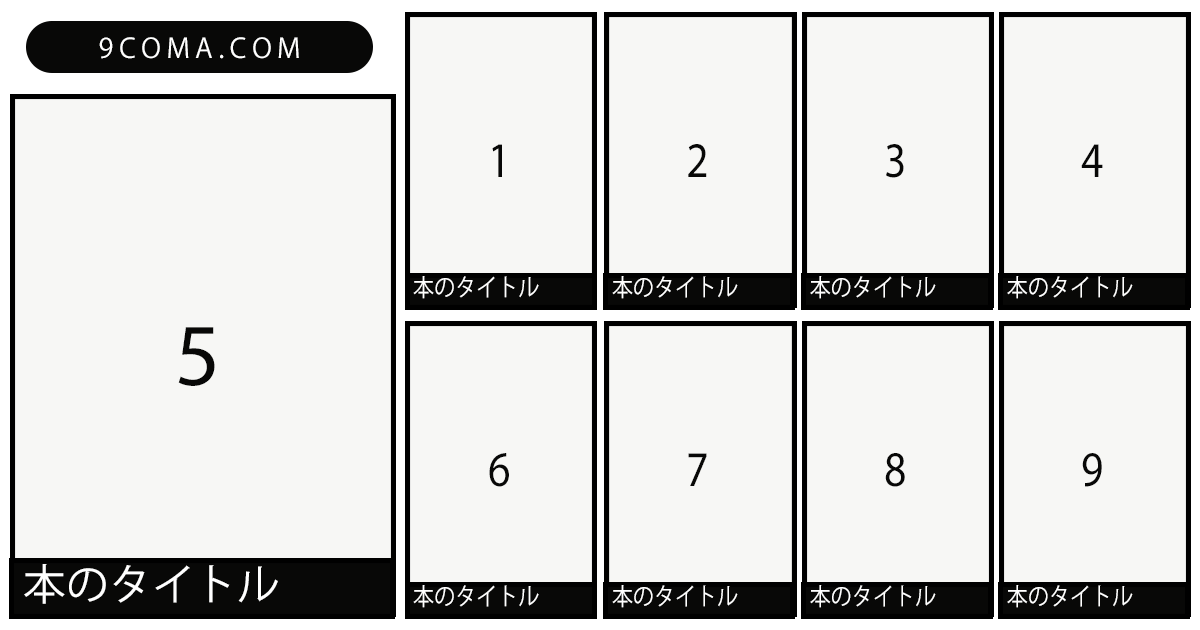
<style>
.page{position:relative;width:1200px;height:630px;background:#f7f7f5}
.page>*{position:absolute;margin:0}
.t1{font:27px "KozGoPr6N-Regular";letter-spacing:0.2em;color:#ffffff}
.t2{font:50px "MyriadPro-Regular";color:#080807;scale:0.88 1}
.t3{font:24px "KozGoPr6N-Regular";color:#ffffff;scale:0.88 1}
.t4{font:88.9px "MyriadPro-Regular";color:#080807}
.t5{font:42.7px "KozGoPr6N-Regular";color:#ffffff}
</style>
<div class="page">
<p class="t1" style="left:99px;top:37px;width:200px;height:22px">9COMA.COM</p>
<p class="t2" style="left:492px;top:144px;width:10px;height:33px">1</p>
<p class="t2" style="left:688px;top:144px;width:19px;height:33px">2</p>
<p class="t2" style="left:886px;top:144px;width:18px;height:34px">3</p>
<p class="t2" style="left:1081px;top:144px;width:22px;height:33px">4</p>
<p class="t3" style="left:413px;top:276px;width:126px;height:23px">本のタイトル</p>
<p class="t3" style="left:612px;top:276px;width:126px;height:23px">本のタイトル</p>
<p class="t3" style="left:810px;top:276px;width:126px;height:23px">本のタイトル</p>
<p class="t3" style="left:1007px;top:276px;width:126px;height:23px">本のタイトル</p>
<p class="t4" style="left:178px;top:327px;width:37px;height:59px">5</p>
<p class="t2" style="left:489px;top:453px;width:20px;height:34px">6</p>
<p class="t2" style="left:688px;top:453px;width:19px;height:33px">7</p>
<p class="t2" style="left:885px;top:453px;width:20px;height:34px">8</p>
<p class="t2" style="left:1082px;top:453px;width:20px;height:34px">9</p>
<p class="t5" style="left:24px;top:564px;width:254px;height:40px">本のタイトル</p>
<p class="t3" style="left:413px;top:585px;width:126px;height:23px">本のタイトル</p>
<p class="t3" style="left:612px;top:585px;width:126px;height:23px">本のタイトル</p>
<p class="t3" style="left:810px;top:585px;width:126px;height:23px">本のタイトル</p>
<p class="t3" style="left:1007px;top:585px;width:126px;height:23px">本のタイトル</p>
</div>
